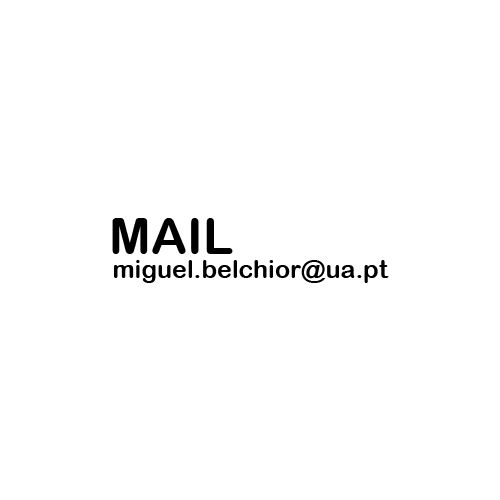
<style>
.page{position:relative;width:500px;height:500px;background:#ffffff}
.page>*{position:absolute;margin:0}
.t1{font:50px "ArialRoundedMTBold";color:#000000}
.t2{font:25px "ArialRoundedMTBold";color:#000000}
</style>
<div class="page">
<p class="t1" style="left:112px;top:218px;width:121px;height:36px">MAIL</p>
<p class="t2" style="left:114px;top:260px;width:275px;height:23px">miguel.belchior@ua.pt</p>
</div>
